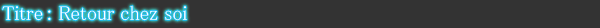
<style>
.page{position:relative;width:600px;height:28px;background:#333333}
.page>*{position:absolute;margin:0}
.t1{font:20px "MS-PMincho";color:#ffffff}
</style>
<div class="page">
<p class="t1" style="left:2px;top:5px;width:185px;height:16px">Titre : Retour chez soi</p>
</div>
